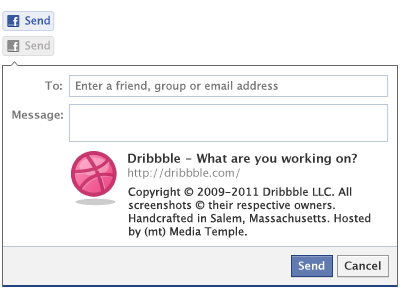
<style>
.page{position:relative;width:400px;height:300px;background:#ffffff}
.page>*{position:absolute;margin:0}
.t1{font:11px "LucidaGrande";color:#3657a9}
.t2{font:11px "LucidaGrande";color:#afaaaa}
.t3{font:11px "LucidaGrande-Bold";color:#777777}
.t4{font:11px "LucidaGrande";color:#777777}
.t5{font:12px "LucidaGrande-Bold";color:#333333}
.t6{font:11px "LucidaGrande";color:#808080}
.t7{font:11px "LucidaGrande";color:#333333}
.t8{font:11px "LucidaGrande-Bold";color:#ffffff}
.t9{font:11px "LucidaGrande-Bold";color:#333333}
</style>
<div class="page">
<p class="t1" style="left:25px;top:15px;width:25px;height:10px">Send</p>
<p class="t2" style="left:25px;top:40px;width:25px;height:10px">Send</p>
<p class="t3" style="left:45px;top:81px;width:17px;height:9px">To:</p>
<p class="t4" style="left:76px;top:81px;width:202px;height:11px">Enter a friend, group or email address</p>
<p class="t3" style="left:12px;top:110px;width:51px;height:11px">Message:</p>
<p class="t5" style="left:128px;top:153px;width:229px;height:12px">Dribbble - What are you working on?</p>
<p class="t6" style="left:128px;top:168px;width:112px;height:11px">http://dribbble.com/</p>
<p class="t7" style="left:128px;top:187px;width:243px;height:51px">Copyright © 2009-2011 Dribbble LLC. All screenshots © their respective owners. Handcrafted in Salem, Massachusetts. Hosted by (mt) Media Temple.</p>
<p class="t8" style="left:298px;top:261px;width:27px;height:9px">Send</p>
<p class="t9" style="left:344px;top:261px;width:37px;height:9px">Cancel</p>
</div>
